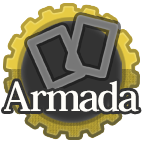
<style>
.page{position:relative;width:142px;height:142px;background:#ffffff}
.page>*{position:absolute;margin:0}
.t1{font:41px "HeiseiMinStd-W7";letter-spacing:-0.04em;color:#fffef9}
</style>
<div class="page">
<p class="t1" style="left:4px;top:80px;width:135px;height:32px">Armada</p>
</div>
